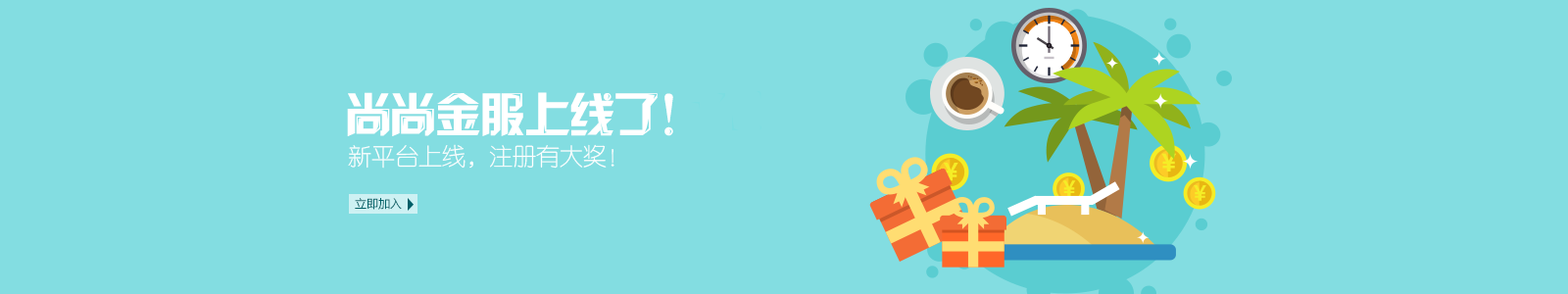
<style>
.page{position:relative;width:1568px;height:294px;background:#83dde1}
.page>*{position:absolute;margin:0}
.t1{font:47px "JLinXin";letter-spacing:-0.05em;color:#ffffff}
.t2{font:23.5px "FZY1JW--GB1-0";color:#ffffff}
.t3{font:23.7px "MicrosoftYaHei-Bold";color:#f5ed26}
.t4{font:20.4px "MicrosoftYaHei-Bold";color:#f5ed26}
.t5{font:11.8px "MicrosoftYaHei";color:#006167}
</style>
<div class="page">
<p class="t1" style="left:347px;top:92px;width:326px;height:44px">尚尚金服上线了！</p>
<p class="t2" style="left:348px;top:144px;width:266px;height:25px">新平台上线，注册有大奖！</p>
<p class="t3" style="left:1161px;top:153px;width:15px;height:19px">￥</p>
<p class="t3" style="left:944px;top:163px;width:14px;height:18px">￥</p>
<p class="t4" style="left:1062px;top:180px;width:14px;height:16px">￥</p>
<p class="t4" style="left:1194px;top:185px;width:12px;height:16px">￥</p>
<p class="t5" style="left:355px;top:198px;width:47px;height:12px">立即加入</p>
</div>
